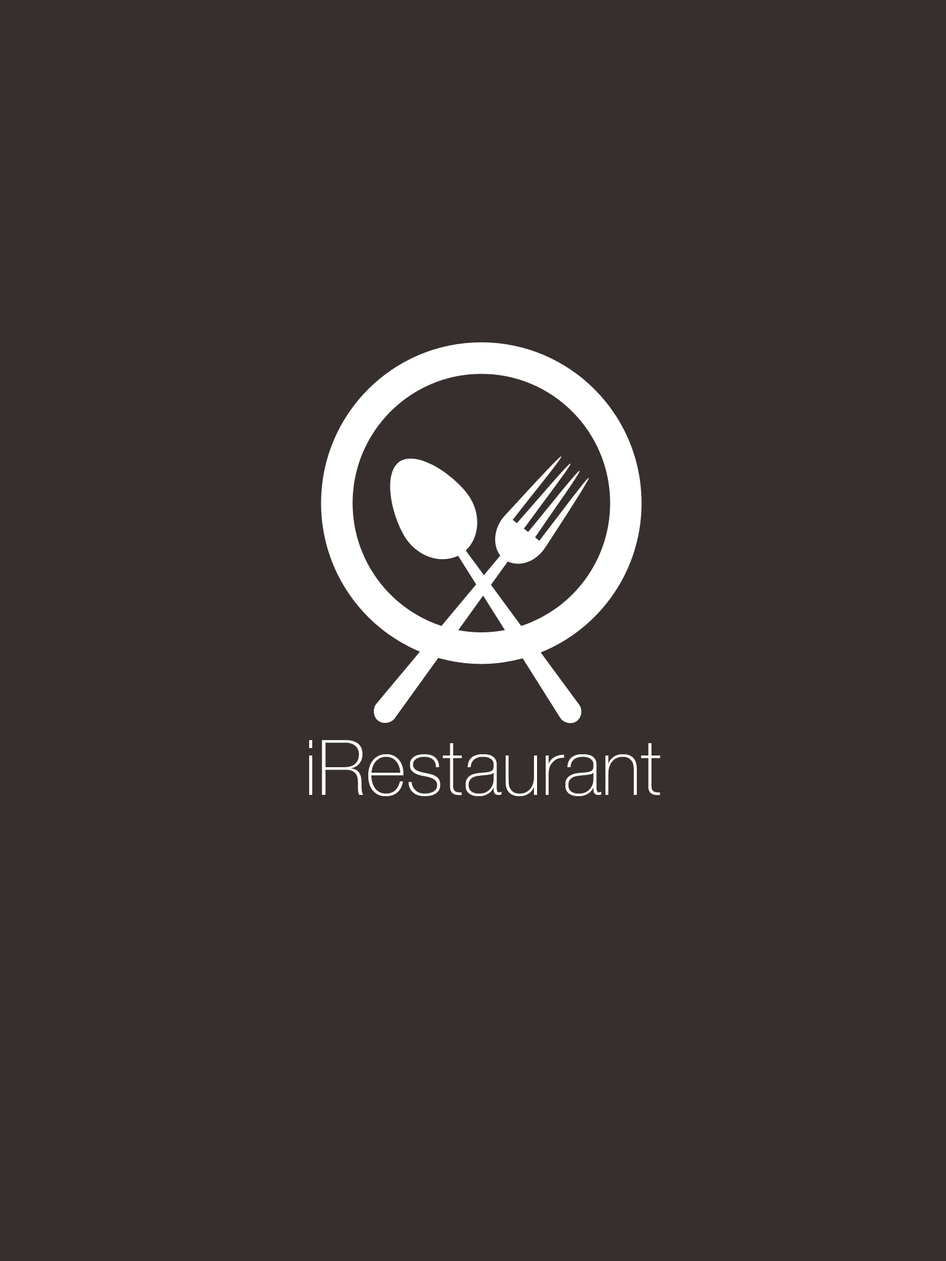
<style>
.page{position:relative;width:946px;height:1261px;background:#362f2d}
.page>*{position:absolute;margin:0}
.t1{font:77px "HelveticaNeue-Thin";color:#ffffff}
</style>
<div class="page">
<p class="t1" style="left:309px;top:740px;width:351px;height:57px">iRestaurant</p>
</div>
